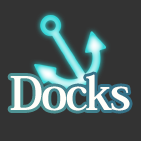
<style>
.page{position:relative;width:141px;height:141px;background:#333333}
.page>*{position:absolute;margin:0}
.t1{font:48px "HeiseiMinStd-W7";letter-spacing:-0.04em;color:#fffef9}
</style>
<div class="page">
<p class="t1" style="left:10px;top:74px;width:120px;height:37px">Docks</p>
</div>
